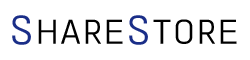
<style>
.page{position:relative;width:250px;height:60px;background:#ffffff}
.page>*{position:absolute;margin:0}
.t1{font:27.8px "TTOmniGothicM";letter-spacing:0.1em;color:#000000}
.t2{font:33.3px "TTOmniGothicM";letter-spacing:0.1em;color:#1a2e88}
</style>
<div class="page">
<p class="t1" style="left:12px;top:15px;width:225px;height:30px"><span class="t2">S</span>HARE<span class="t2">S</span>TORE</p>
</div>
